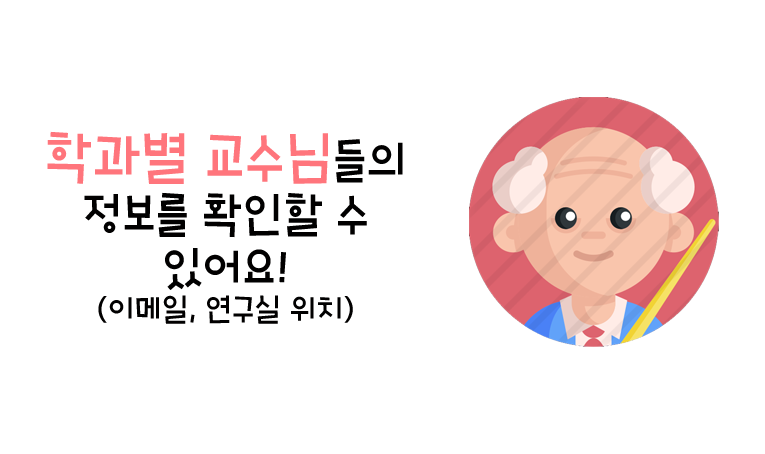
<style>
.page{position:relative;width:765px;height:454px;background:#ffffff}
.page>*{position:absolute;margin:0}
.t1{font:45px "HoonJungleR";color:#010000}
.t2{font:54px "HoonJungleR";color:#ff757c}
.t3{font:30px "HoonJungleR";color:#010000}
</style>
<div class="page">
<p class="t1" style="left:47px;top:131px;width:356px;height:193px;text-align:center"><span class="t2">학과별 교수님</span>들의 정보를 확인할 수 있어요!<br><span class="t3">(이메일, 연구실 위치)</span></p>
</div>
